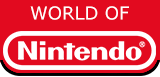
<style>
.page{position:relative;width:160px;height:77px;background:#e20a1f}
.page>*{position:absolute;margin:0}
.t1{font:18px "Verdana";color:#ffffff}
</style>
<div class="page">
<p class="t1" style="left:30px;top:6px;width:99px;height:14px">WORLD OF</p>
</div>
